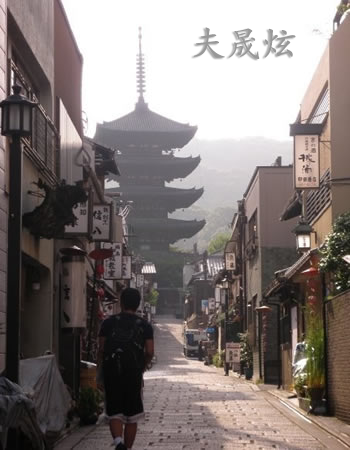
<style>
.page{position:relative;width:350px;height:450px}
.page>*{position:absolute;margin:0}
.t1{font:36px "AdobeKaitiStd-Regular";color:#989898}
</style>
<div class="page">
<p class="t1" style="left:193px;top:27px;width:103px;height:32px">夫晟炫</p>
</div>
